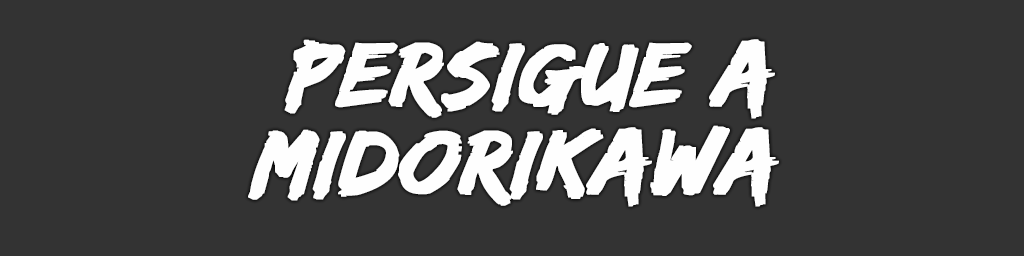
<style>
.page{position:relative;width:1024px;height:256px;background:#333333}
.page>*{position:absolute;margin:0}
.t1{font:94px/88px "EdoSZ";color:#fefefe;font-weight:bold;font-style:italic;scale:1.04 1}
</style>
<div class="page">
<p class="t1" style="left:248px;top:39px;width:531px;height:168px;text-align:center">persigue a<br>midorikawa</p>
</div>
